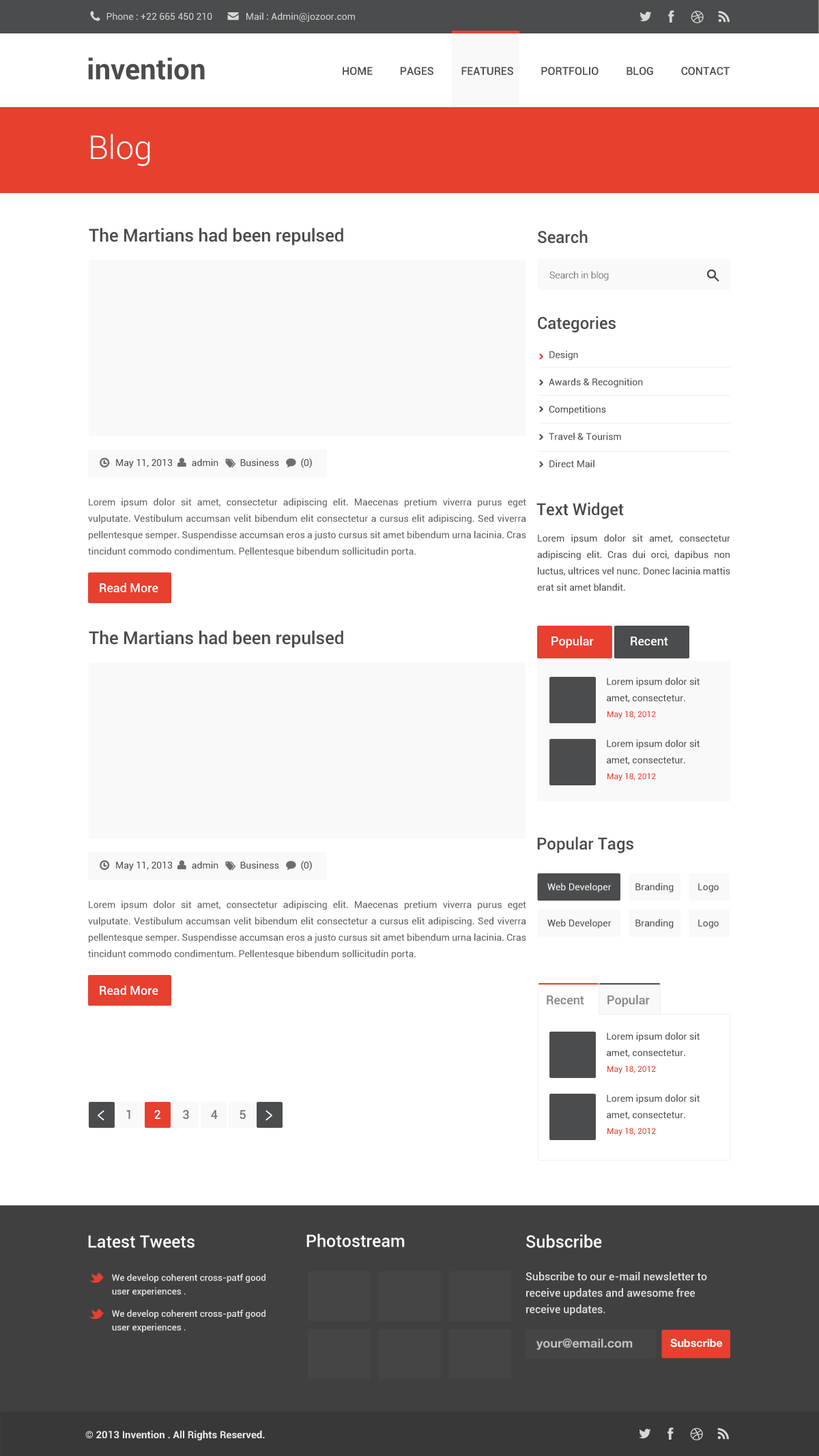
<style>
.page{position:relative;width:819px;height:1456px;background:#ffffff}
.page>*{position:absolute;margin:0}
.t1{font:9.6px "Roboto-Regular";color:#d7d7d7}
.t2{font:10.9px "Roboto-Medium";color:#4b4c4d}
.t3{font:32.8px "Roboto-Light";color:#ffffff}
.t4{font:17.7px "Roboto-Medium";color:#4b4c4d}
.t5{font:16.4px "Roboto-Medium";color:#4b4c4d}
.t6{font:9.6px "Roboto-Light";color:#4b4c4d}
.t7{font:9.6px/27.3px "Roboto-Regular";color:#4b4c4d}
.t8{font:9.6px "Roboto-Regular";color:#4b4c4d}
.t9{font:9.6px/16.4px "Roboto-Regular";color:#5c5d5e}
.t10{font:9.6px/16.4px "Roboto-Regular";color:#4b4c4d}
.t11{font:12.3px "Roboto-Medium";color:#ffffff}
.t12{font:8.2px "Roboto-Regular";color:#e7402f}
.t13{font:12.3px "Roboto-Medium";color:#868686}
.t14{font:12.3px "Roboto-Medium";color:#878787}
.t15{font:12.3px "Roboto-Medium";color:#757575}
.t16{font:17.1px "Roboto-Medium";color:#ffffff}
.t17{font:10.9px/16.4px "Roboto-Medium";color:#e1e1e1}
.t18{font:17.1px/19.5px "Roboto-Medium";color:#ffffff}
.t19{font:9.2px/13.7px "Roboto-Medium";color:#e1e1e1}
.t20{font:16.4px/4.6px "Roboto-Bold";color:#ffffff}
.t21{font:12.3px "HelveticaNeue-Bold";color:#c2c2c2}
.t22{font:10.9px "HelveticaNeue-Bold";color:#ffffff}
.t23{font:10.2px "Roboto-Bold";color:#eaeaea}
</style>
<div class="page">
<p class="t1" style="left:106px;top:12px;width:249px;height:10px">Phone : +22 665 450 210              Mail : Admin@jozoor.com</p>
<p class="t2" style="left:343px;top:67px;width:386px;height:8px">HOME          PAGES          FEATURES          PORTFOLIO          BLOG          CONTACT</p>
<p class="t3" style="left:91px;top:134px;width:59px;height:33px">Blog</p>
<p class="t4" style="left:89px;top:228px;width:254px;height:18px">The Martians had been repulsed</p>
<p class="t5" style="left:538px;top:230px;width:50px;height:14px">Search</p>
<p class="t6" style="left:549px;top:271px;width:60px;height:9px">Search in blog</p>
<p class="t5" style="left:538px;top:316px;width:78px;height:17px">Categories</p>
<p class="t7" style="left:549px;top:351px;width:94px;height:116px">Design<br>Awards &amp; Recognition<br>Competitions<br>Travel &amp; Tourism<br>Direct Mail</p>
<p class="t8" style="left:116px;top:458px;width:196px;height:10px">May 11, 2013        admin         Business         (0)</p>
<p class="t9" style="left:88px;top:498px;width:438px;height:59px;text-align:justify">Lorem ipsum dolor sit amet, consectetur adipiscing elit. Maecenas pretium viverra purus eget vulputate. Vestibulum accumsan velit bibendum elit consectetur a cursus elit adipiscing. Sed viverra pellentesque semper. Suspendisse accumsan eros a justo cursus sit amet bibendum urna lacinia. Cras tincidunt commodo condimentum. Pellentesque bibendum sollicitudin porta.</p>
<p class="t5" style="left:536px;top:502px;width:88px;height:17px">Text Widget</p>
<p class="t10" style="left:537px;top:534px;width:193px;height:57px;text-align:justify">Lorem ipsum dolor sit amet, consectetur adipiscing elit. Cras dui orci, dapibus non luctus, ultrices vel nunc. Donec lacinia mattis erat sit amet blandit.</p>
<p class="t11" style="left:100px;top:583px;width:58px;height:10px">Read More</p>
<p class="t4" style="left:89px;top:631px;width:254px;height:17px">The Martians had been repulsed</p>
<p class="t11" style="left:551px;top:636px;width:43px;height:12px">Popular</p>
<p class="t11" style="left:631px;top:637px;width:37px;height:9px">Recent</p>
<p class="t10" style="left:607px;top:678px;width:92px;height:25px">Lorem ipsum dolor sit amet, consectetur.</p>
<p class="t12" style="left:607px;top:711px;width:49px;height:8px">May 18, 2012</p>
<p class="t10" style="left:607px;top:740px;width:92px;height:25px">Lorem ipsum dolor sit amet, consectetur.</p>
<p class="t12" style="left:607px;top:773px;width:49px;height:8px">May 18, 2012</p>
<p class="t5" style="left:537px;top:837px;width:96px;height:17px">Popular Tags</p>
<p class="t8" style="left:116px;top:860px;width:196px;height:11px">May 11, 2013        admin         Business         (0)</p>
<p class="t9" style="left:88px;top:901px;width:438px;height:58px;text-align:justify">Lorem ipsum dolor sit amet, consectetur adipiscing elit. Maecenas pretium viverra purus eget vulputate. Vestibulum accumsan velit bibendum elit consectetur a cursus elit adipiscing. Sed viverra pellentesque semper. Suspendisse accumsan eros a justo cursus sit amet bibendum urna lacinia. Cras tincidunt commodo condimentum. Pellentesque bibendum sollicitudin porta.</p>
<p class="t8" style="left:547px;top:919px;width:172px;height:10px">Web Developer          Branding          Logo</p>
<p class="t11" style="left:100px;top:985px;width:58px;height:11px">Read More</p>
<p class="t13" style="left:547px;top:996px;width:37px;height:8px">Recent</p>
<p class="t14" style="left:607px;top:995px;width:43px;height:12px">Popular</p>
<p class="t10" style="left:607px;top:1032px;width:92px;height:26px">Lorem ipsum dolor sit amet, consectetur.</p>
<p class="t12" style="left:607px;top:1066px;width:49px;height:8px">May 18, 2012</p>
<p class="t10" style="left:607px;top:1095px;width:92px;height:25px">Lorem ipsum dolor sit amet, consectetur.</p>
<p class="t15" style="left:126px;top:1110px;width:120px;height:9px">1       <span class="t11">2       </span>3       4       5</p>
<p class="t12" style="left:607px;top:1128px;width:49px;height:8px">May 18, 2012</p>
<p class="t16" style="left:88px;top:1235px;width:106px;height:13px">Latest Tweets</p>
<p class="t16" style="left:306px;top:1234px;width:99px;height:13px">Photostream</p>
<p class="t17" style="left:525px;top:1234px;width:182px;height:82px"><span class="t18">Subscribe<br><br><br><br></span>Subscribe to our e-mail newsletter to<br>receive updates and awesome free<br>receive updates.</p>
<p class="t19" style="left:112px;top:1274px;width:153px;height:59px"><span class="t20"><br>        </span>We develop coherent cross-patf good<br>        user experiences .<br><br>        We develop coherent cross-patf good<br>        user experiences .</p>
<p class="t21" style="left:536px;top:1338px;width:97px;height:12px">your@email.com</p>
<p class="t22" style="left:670px;top:1339px;width:53px;height:9px">Subscribe</p>
<p class="t23" style="left:85px;top:1430px;width:180px;height:11px">© 2013 Invention . All Rights Reserved.</p>
</div>
